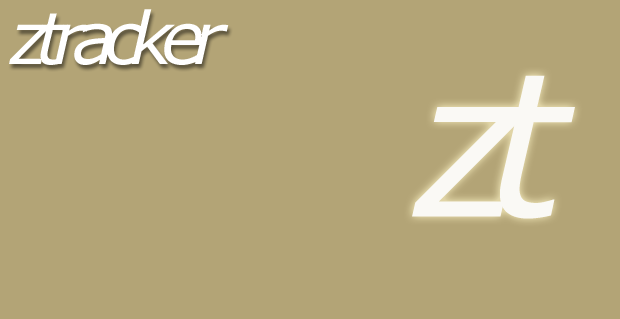
<style>
.page{position:relative;width:620px;height:319px;background:#b3a476}
.page>*{position:absolute;margin:0}
.t1{font:72px "Verdana-Italic";letter-spacing:-0.159em;color:#ffffff}
.t2{font:200px "Verdana-Italic";letter-spacing:-0.164em;color:#ffffff}
</style>
<div class="page">
<p class="t1" style="left:9px;top:9px;width:220px;height:56px">ztracker</p>
<p class="t2" style="left:412px;top:75px;width:163px;height:144px;opacity:0.93">zt</p>
</div>
